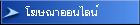
<style>
.page{position:relative;width:140px;height:25px}
.page>*{position:absolute;margin:0}
.t1{font:15.3px "EucrosiaDSE";color:#ffffff;scale:1.12 1}
.t2{font:15.3px "EucrosiaDSE";letter-spacing:-0.05em;color:#ffffff;scale:1.12 1}
</style>
<div class="page">
<p class="t1" style="left:25px;top:4px;width:74px;height:12px"><span class="t2">â</span>¦É³ÒÍÍ¹äÅ¹ì</p>
</div>
